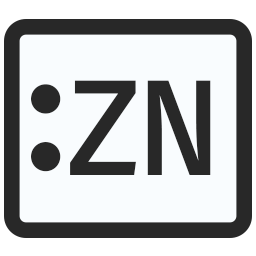
<style>
.page{position:relative;width:256px;height:256px;background:#f9fcfe}
.page>*{position:absolute;margin:0}
.t1{font:158.3px "FiraCodeNerdFontComplete-Medium";letter-spacing:-0.1em;color:#282828;text-transform:uppercase}
.t2{font:133.3px "FiraCodeNerdFontComplete-Medium";letter-spacing:-0.04em;color:#282828;text-transform:uppercase}
</style>
<div class="page">
<p class="t1" style="left:31px;top:84px;width:30px;height:88px">:</p>
<p class="t2" style="left:70px;top:80px;width:141px;height:95px">ZN</p>
</div>
